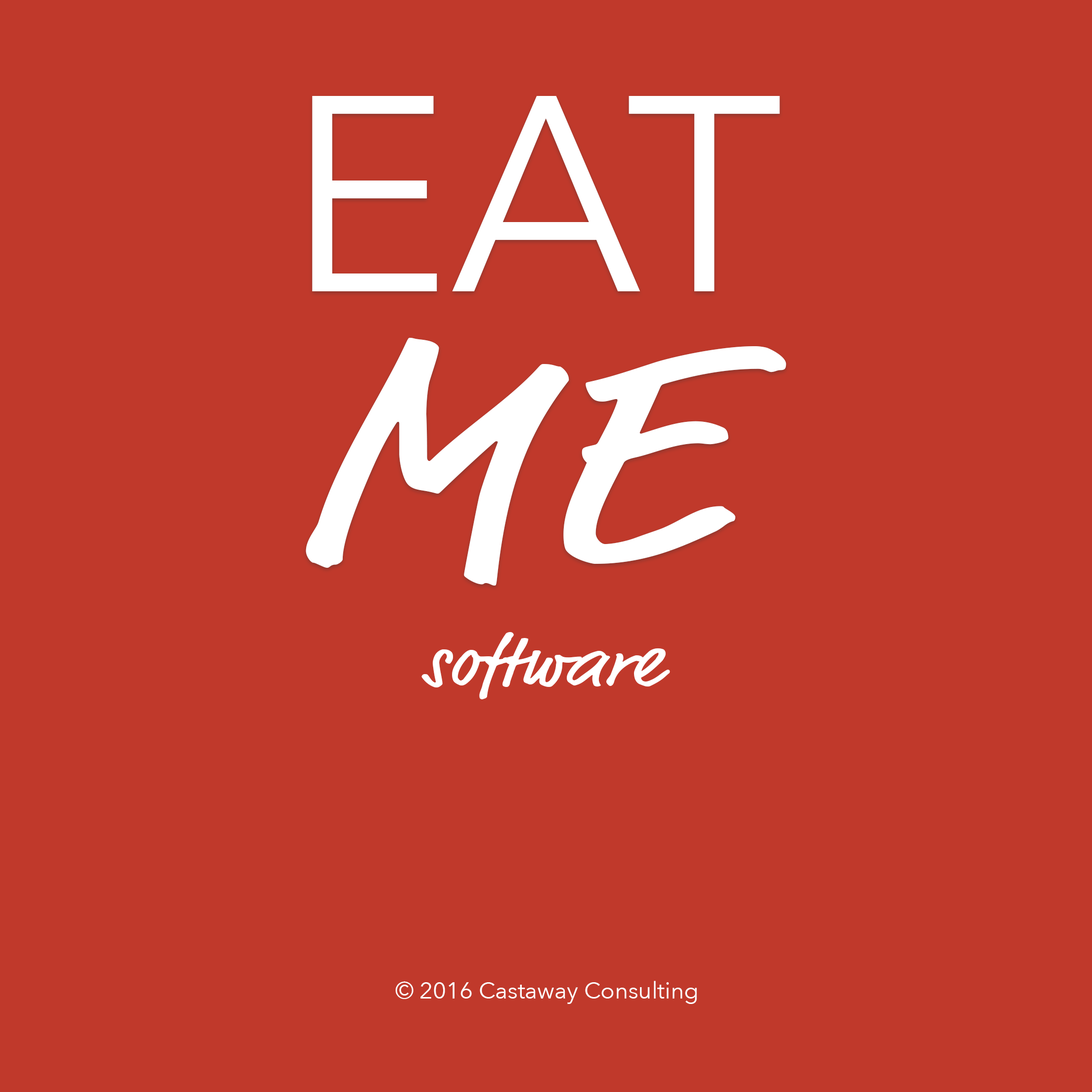
<style>
.page{position:relative;width:1092px;height:1092px;background:#c0392b}
.page>*{position:absolute;margin:0}
.t1{font:275.7px "AvenirNext-Regular";color:#ffffff}
.t2{font:318.4px "MarketOT";color:#ffffff;scale:1.16 1}
.t3{font:72px "MarketOT";color:#ffffff;scale:1.16 1}
.t4{font:23.1px "AvenirNext-Regular";color:#ffffff}
</style>
<div class="page">
<p class="t1" style="left:312px;top:96px;width:468px;height:195px">EAT</p>
<p class="t2" style="left:306px;top:338px;width:480px;height:248px">ME</p>
<p class="t3" style="left:421px;top:632px;width:249px;height:67px">software</p>
<p class="t4" style="left:395px;top:981px;width:302px;height:23px">© 2016 Castaway Consulting</p>
</div>
